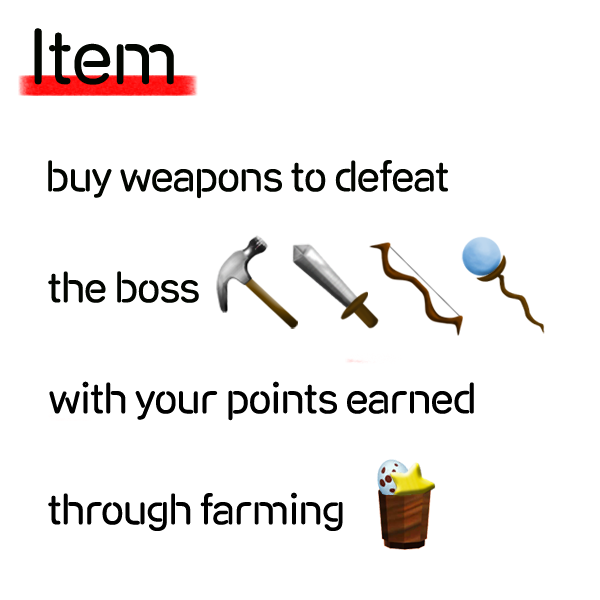
<style>
.page{position:relative;width:600px;height:600px;background:#ffffff}
.page>*{position:absolute;margin:0}
.t1{font:72px "RixNeonSignB";letter-spacing:-0.05em;color:#020500}
.t2{font:40px "RixNeonSignB";letter-spacing:-0.05em;color:#020500}
.t3{font:40px "RixNeonSignB";letter-spacing:-0.05em;color:#000000}
</style>
<div class="page">
<p class="t1" style="left:34px;top:28px;width:140px;height:57px">Item</p>
<p class="t2" style="left:48px;top:160px;width:400px;height:39px">buy weapons to defeat</p>
<p class="t2" style="left:48px;top:271px;width:151px;height:32px">the boss</p>
<p class="t3" style="left:49px;top:381px;width:425px;height:40px">with your points earned</p>
<p class="t3" style="left:48px;top:492px;width:295px;height:39px">through farming</p>
</div>
